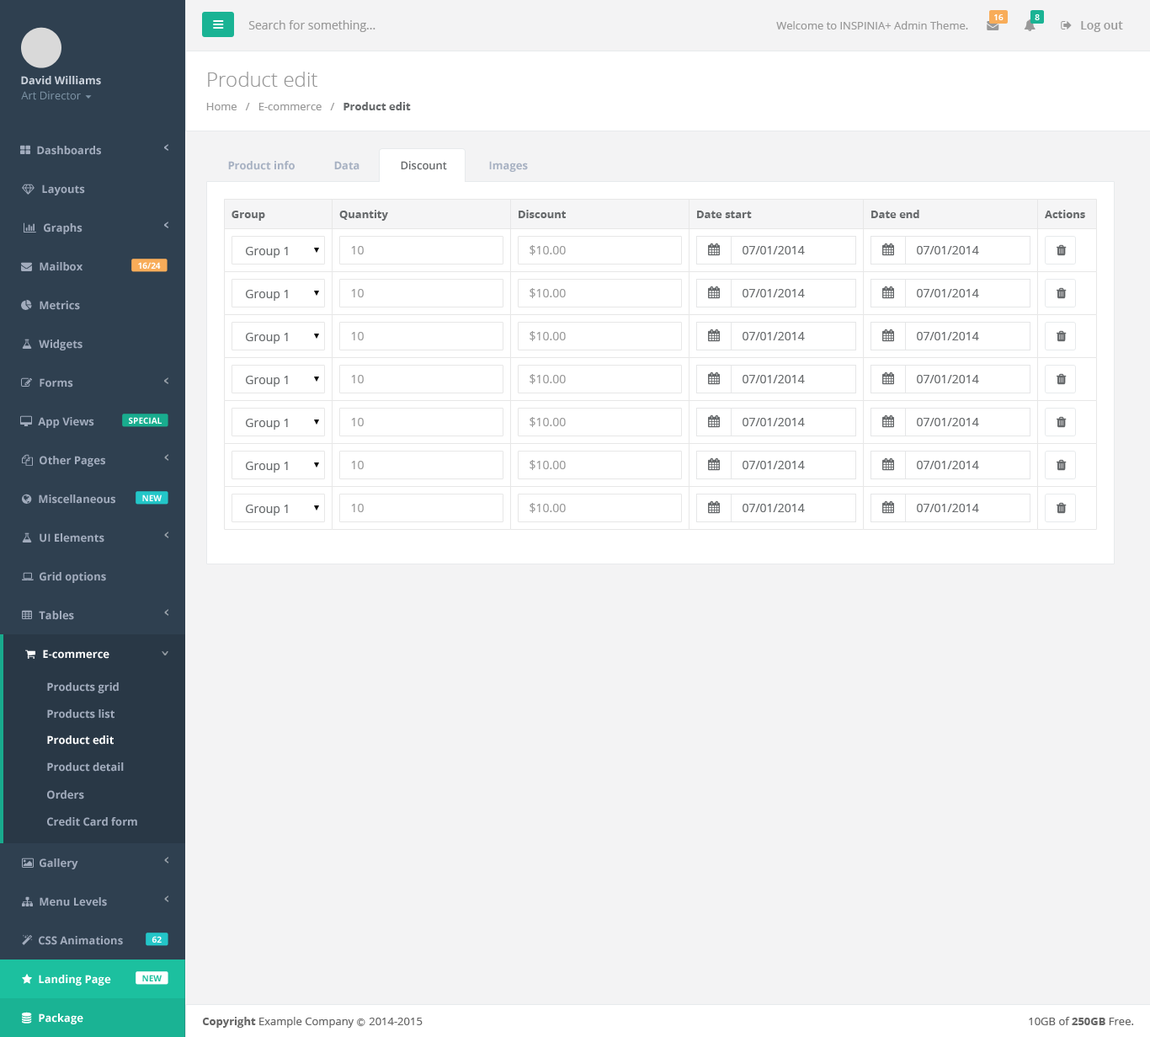
<style>
.page{position:relative;width:1150px;height:1037px;background:#f3f3f4}
.page>*{position:absolute;margin:0}
.t1{font:8.4px "OpenSans-Semibold";color:#ffffff}
.t2{font:11.8px "OpenSans";color:#999999}
.t3{font:10.9px "OpenSans";color:#999999}
.t4{font:11.8px "OpenSans-Semibold";color:#999999}
.t5{font:10.9px "OpenSans-Bold";color:#cad1db}
.t6{font:20.2px "OpenSans-Light";color:#999999}
.t7{font:10.9px "OpenSans";color:#7d93a5}
.t8{font:10.9px "OpenSans-Bold";color:#676a6c}
.t9{font:10.9px "OpenSans-Bold";color:#a2acbd}
.t10{font:10.9px "OpenSans-Bold";color:#a7b1c2}
.t11{font:10.9px "OpenSans-Semibold";color:#676a6c}
.t12{font:11.8px "OpenSans";color:#9b9b9b}
.t13{font:11.8px "OpenSans";color:#676a6c}
.t14{font:8.4px "OpenSans-Bold";color:#fefefe}
.t15{font:10.9px "OpenSans-Bold";color:#ffffff}
.t16{font:8.4px "OpenSans-Bold";color:#1cc09f}
.t17{font:10.9px "OpenSans";color:#666666}
.t18{font:10.9px "OpenSans-Bold";color:#666666}
.t19{font:8.4px "Meiryo";color:#666666}
</style>
<div class="page">
<p class="t1" style="left:995px;top:14px;width:9px;height:6px">16</p>
<p class="t1" style="left:1035px;top:14px;width:5px;height:6px">8</p>
<p class="t2" style="left:248px;top:20px;width:128px;height:12px">Search for something...</p>
<p class="t3" style="left:776px;top:21px;width:192px;height:8px">Welcome to INSPINIA+ Admin Theme.</p>
<p class="t4" style="left:1081px;top:21px;width:42px;height:11px">Log out</p>
<p class="t5" style="left:21px;top:76px;width:80px;height:9px">David Williams</p>
<p class="t6" style="left:208px;top:72px;width:109px;height:15px">Product edit</p>
<p class="t7" style="left:21px;top:91px;width:60px;height:9px">Art Director</p>
<p class="t3" style="left:206px;top:102px;width:205px;height:8px">Home   /   E-commerce   /   <span class="t8">Product edit</span></p>
<p class="t9" style="left:37px;top:146px;width:64px;height:9px">Dashboards</p>
<p class="t10" style="left:228px;top:161px;width:67px;height:9px">Product info</p>
<p class="t10" style="left:334px;top:161px;width:26px;height:9px">Data</p>
<p class="t11" style="left:401px;top:161px;width:46px;height:9px">Discount</p>
<p class="t10" style="left:489px;top:161px;width:39px;height:11px">Images</p>
<p class="t9" style="left:42px;top:184px;width:43px;height:11px">Layouts</p>
<p class="t8" style="left:339px;top:210px;width:49px;height:11px">Quantity</p>
<p class="t8" style="left:339px;top:210px;width:49px;height:11px">Quantity</p>
<p class="t8" style="left:519px;top:210px;width:48px;height:8px">Discount</p>
<p class="t8" style="left:519px;top:210px;width:48px;height:8px">Discount</p>
<p class="t8" style="left:872px;top:210px;width:48px;height:8px">Date end</p>
<p class="t8" style="left:872px;top:210px;width:48px;height:8px">Date end</p>
<p class="t8" style="left:1045px;top:210px;width:40px;height:8px">Actions</p>
<p class="t8" style="left:1045px;top:210px;width:40px;height:8px">Actions</p>
<p class="t8" style="left:232px;top:211px;width:33px;height:10px">Group</p>
<p class="t8" style="left:232px;top:211px;width:33px;height:10px">Group</p>
<p class="t8" style="left:697px;top:211px;width:55px;height:7px">Date start</p>
<p class="t8" style="left:697px;top:211px;width:55px;height:7px">Date start</p>
<p class="t9" style="left:44px;top:223px;width:39px;height:11px">Graphs</p>
<p class="t12" style="left:351px;top:246px;width:13px;height:8px">10</p>
<p class="t12" style="left:530px;top:245px;width:36px;height:10px">$10.00</p>
<p class="t13" style="left:743px;top:246px;width:62px;height:8px">07/01/2014</p>
<p class="t13" style="left:917px;top:246px;width:62px;height:8px">07/01/2014</p>
<p class="t13" style="left:246px;top:247px;width:42px;height:11px">Group 1</p>
<p class="t9" style="left:40px;top:262px;width:43px;height:9px">Mailbox</p>
<p class="t14" style="left:138px;top:262px;width:23px;height:7px">16/24</p>
<p class="t13" style="left:246px;top:290px;width:42px;height:11px">Group 1</p>
<p class="t12" style="left:351px;top:289px;width:13px;height:8px">10</p>
<p class="t12" style="left:530px;top:288px;width:36px;height:10px">$10.00</p>
<p class="t13" style="left:743px;top:289px;width:62px;height:8px">07/01/2014</p>
<p class="t13" style="left:917px;top:289px;width:62px;height:8px">07/01/2014</p>
<p class="t9" style="left:40px;top:301px;width:40px;height:9px">Metrics</p>
<p class="t9" style="left:39px;top:339px;width:44px;height:11px">Widgets</p>
<p class="t13" style="left:246px;top:333px;width:42px;height:11px">Group 1</p>
<p class="t12" style="left:351px;top:332px;width:13px;height:8px">10</p>
<p class="t12" style="left:530px;top:331px;width:36px;height:10px">$10.00</p>
<p class="t13" style="left:743px;top:332px;width:62px;height:8px">07/01/2014</p>
<p class="t13" style="left:917px;top:332px;width:62px;height:8px">07/01/2014</p>
<p class="t13" style="left:246px;top:376px;width:42px;height:11px">Group 1</p>
<p class="t12" style="left:351px;top:375px;width:13px;height:8px">10</p>
<p class="t12" style="left:530px;top:374px;width:36px;height:10px">$10.00</p>
<p class="t13" style="left:743px;top:375px;width:62px;height:8px">07/01/2014</p>
<p class="t13" style="left:917px;top:375px;width:62px;height:8px">07/01/2014</p>
<p class="t9" style="left:40px;top:378px;width:33px;height:9px">Forms</p>
<p class="t9" style="left:38px;top:417px;width:56px;height:11px">App Views</p>
<p class="t14" style="left:129px;top:417px;width:33px;height:7px">SPECIAL</p>
<p class="t13" style="left:246px;top:419px;width:42px;height:10px">Group 1</p>
<p class="t12" style="left:351px;top:418px;width:13px;height:8px">10</p>
<p class="t12" style="left:530px;top:417px;width:36px;height:10px">$10.00</p>
<p class="t13" style="left:743px;top:418px;width:62px;height:8px">07/01/2014</p>
<p class="t13" style="left:917px;top:418px;width:62px;height:8px">07/01/2014</p>
<p class="t9" style="left:40px;top:456px;width:65px;height:11px">Other Pages</p>
<p class="t13" style="left:246px;top:461px;width:42px;height:11px">Group 1</p>
<p class="t12" style="left:351px;top:461px;width:13px;height:8px">10</p>
<p class="t12" style="left:530px;top:460px;width:36px;height:10px">$10.00</p>
<p class="t13" style="left:743px;top:461px;width:62px;height:8px">07/01/2014</p>
<p class="t13" style="left:917px;top:461px;width:62px;height:8px">07/01/2014</p>
<p class="t9" style="left:39px;top:494px;width:76px;height:10px">Miscellaneous</p>
<p class="t14" style="left:142px;top:494px;width:20px;height:7px">NEW</p>
<p class="t13" style="left:246px;top:504px;width:42px;height:11px">Group 1</p>
<p class="t12" style="left:351px;top:504px;width:13px;height:8px">10</p>
<p class="t12" style="left:530px;top:503px;width:36px;height:10px">$10.00</p>
<p class="t13" style="left:743px;top:504px;width:62px;height:8px">07/01/2014</p>
<p class="t13" style="left:917px;top:504px;width:62px;height:8px">07/01/2014</p>
<p class="t9" style="left:40px;top:533px;width:64px;height:9px">UI Elements</p>
<p class="t9" style="left:40px;top:572px;width:66px;height:11px">Grid options</p>
<p class="t9" style="left:39px;top:611px;width:35px;height:9px">Tables</p>
<p class="t15" style="left:43px;top:649px;width:66px;height:10px">E-commerce</p>
<p class="t9" style="left:47px;top:682px;width:72px;height:11px">Products grid</p>
<p class="t9" style="left:47px;top:709px;width:68px;height:9px">Products list</p>
<p class="t15" style="left:47px;top:735px;width:67px;height:9px">Product edit</p>
<p class="t9" style="left:47px;top:762px;width:77px;height:9px">Product detail</p>
<p class="t9" style="left:47px;top:790px;width:37px;height:9px">Orders</p>
<p class="t9" style="left:47px;top:817px;width:90px;height:9px">Credit Card form</p>
<p class="t9" style="left:40px;top:858px;width:38px;height:11px">Gallery</p>
<p class="t9" style="left:40px;top:897px;width:67px;height:9px">Menu Levels</p>
<p class="t9" style="left:39px;top:936px;width:84px;height:9px">CSS Animations</p>
<p class="t14" style="left:152px;top:936px;width:10px;height:6px">62</p>
<p class="t15" style="left:39px;top:974px;width:72px;height:11px">Landing Page</p>
<p class="t16" style="left:142px;top:974px;width:20px;height:7px">NEW</p>
<p class="t15" style="left:39px;top:1013px;width:44px;height:11px">Package</p>
<p class="t17" style="left:202px;top:1016px;width:221px;height:11px"><span class="t18">Copyright</span> Example Company <span class="t19">Ⓒ </span>2014-2015</p>
<p class="t17" style="left:1029px;top:1016px;width:105px;height:9px">10GB of <span class="t18">250GB</span> Free.</p>
</div>
